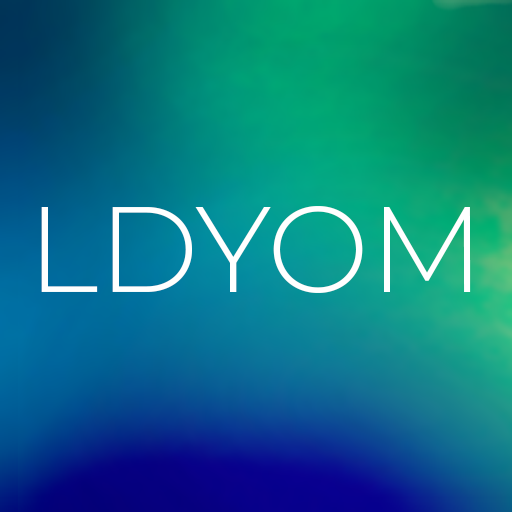
<style>
.page{position:relative;width:512px;height:512px}
.page>*{position:absolute;margin:0}
.t1{font:121.7px "Montserrat-Light";color:#ffffff}
</style>
<div class="page">
<p class="t1" style="left:41px;top:206px;width:430px;height:87px">LDYOM</p>
</div>
